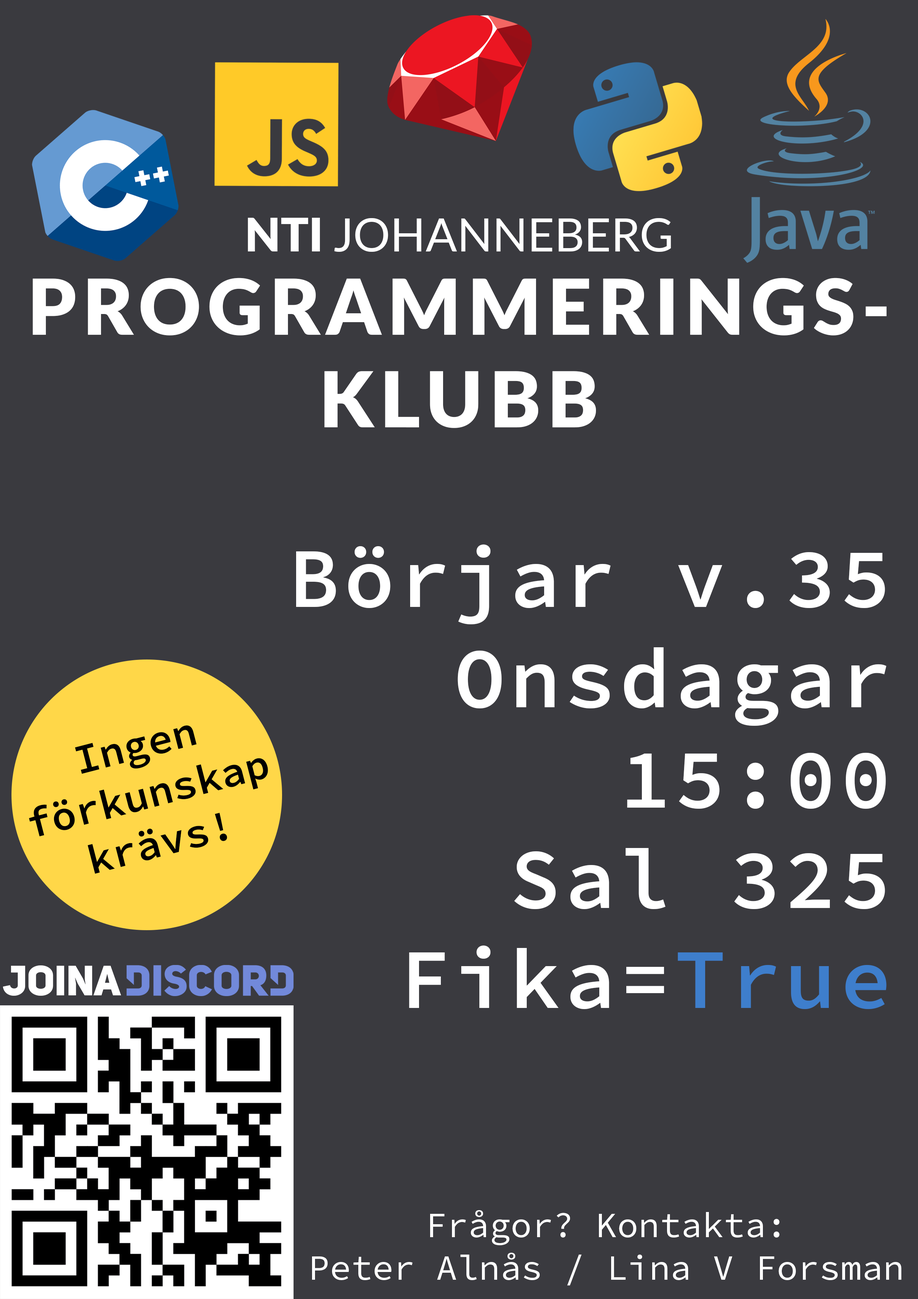
<style>
.page{position:relative;width:918px;height:1299px;background:#3a3a3f}
.page>*{position:absolute;margin:0}
.t1{font:77.1px/83.3px "Lato-Black";letter-spacing:0.08em;color:#ffffff}
.t2{font:46.3px/83.3px "Lato-Black";color:#ffffff}
.t3{font:46.3px/83.3px "Lato-Regular";color:#ffffff}
.t4{font:77.1px "Lato-Black";letter-spacing:0.08em;color:#ffffff}
.t5{font:84.8px/100.3px "SourceCodePro-Semibold";letter-spacing:0.05em;color:#ffffff}
.t6{font:84.8px/100.3px "SourceCodePro-Semibold";letter-spacing:0.05em;color:#3e7ecc}
.t7{font:41.6px "SourceCodePro-Semibold";color:#000000}
.t8{font:41.6px "UniSansHeavyCAPS";letter-spacing:-0.01em;color:#ffffff}
.t9{font:35.5px "SourceCodePro-Regular";color:#ffffff}
</style>
<div class="page">
<p class="t1" style="left:33px;top:218px;width:854px;height:210px;text-align:center"><span class="t2">NTI </span><span class="t3">JOHANNEBERG<br></span>PROGRAMMERINGS-<br><span class="t4">KLUBB</span></p>
<p class="t5" style="left:296px;top:544px;width:591px;height:465px;text-align:right">Börjar v.35<br>Onsdagar<br>15:00<br>Sal 325<br>Fika=<span class="t6">True</span></p>
<p class="t7" style="left:29px;top:725px;width:239px;height:149px;text-align:center;rotate:-15deg">Ingen<br>förkunskap<br>krävs!</p>
<p class="t8" style="left:3px;top:965px;width:118px;height:31px">Joina</p>
<p class="t9" style="left:312px;top:1210px;width:589px;height:75px;text-align:center">Frågor? Kontakta:<br>Peter Alnås / Lina V Forsman</p>
</div>
